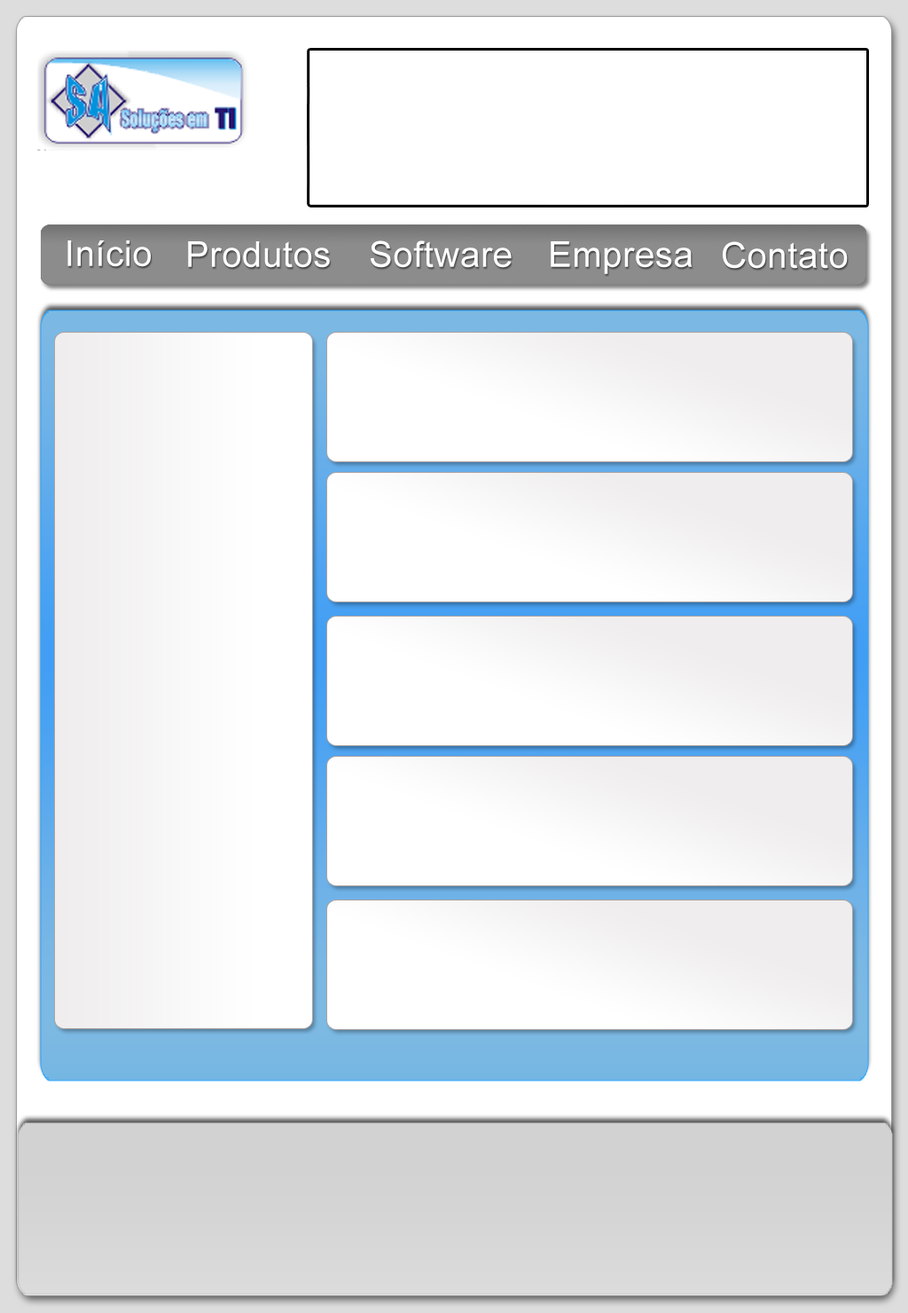
<style>
.page{position:relative;width:908px;height:1313px;background:#ffffff}
.page>*{position:absolute;margin:0}
.t1{font:35.5px "ArialMT";letter-spacing:0.015em;color:#ffffff}
</style>
<div class="page">
<p class="t1" style="left:67px;top:240px;width:84px;height:27px">Início</p>
<p class="t1" style="left:188px;top:241px;width:142px;height:27px">Produtos</p>
<p class="t1" style="left:371px;top:240px;width:141px;height:28px">Software</p>
<p class="t1" style="left:551px;top:241px;width:142px;height:33px">Empresa</p>
<p class="t1" style="left:723px;top:241px;width:125px;height:28px">Contato</p>
</div>
